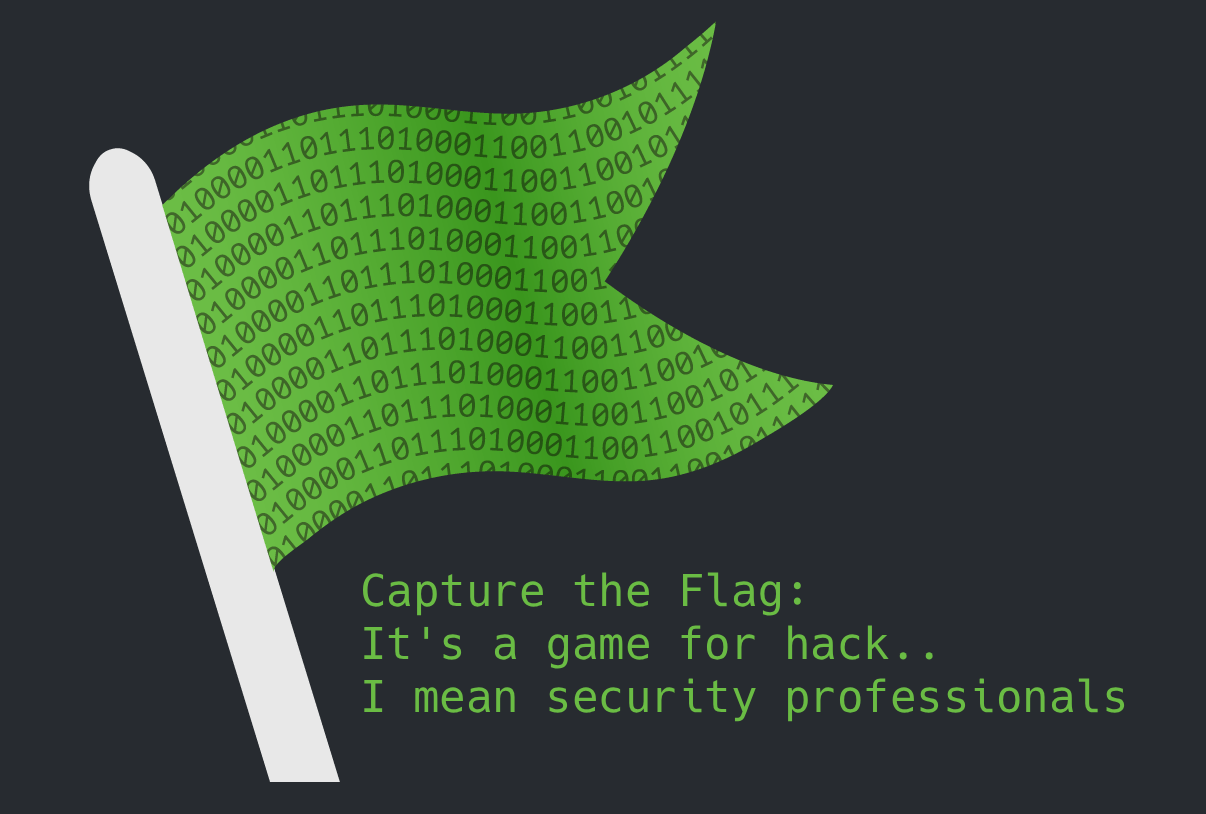
<style>
.page{position:relative;width:1206px;height:814px;background:#272b30}
.page>*{position:absolute;margin:0}
.t1{font:44px "Hack-Regular";color:#6abc44}
</style>
<div class="page">
<p class="t1" style="left:362px;top:572px;width:763px;height:150px">Capture the Flag:<br>It's a game for hack..<br>I mean security professionals</p>
</div>
